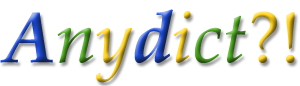
<style>
.page{position:relative;width:300px;height:86px;background:#ffffff}
.page>*{position:absolute;margin:0}
.t1{font:72px "BookAntiqua-Italic"}
.t2{font:6px "BookAntiqua-Italic"}
.t3{font:72px "BookAntiqua-BoldItalic"}
.t4{font:72px "BookAntiqua"}
</style>
<div class="page">
<p class="t1" style="left:0px;top:9px;width:295px;height:74px"><span class="t2">  </span><span class="t3">A</span>ny<span class="t3">d</span>ict  <span class="t4">?!</span></p>
</div>
